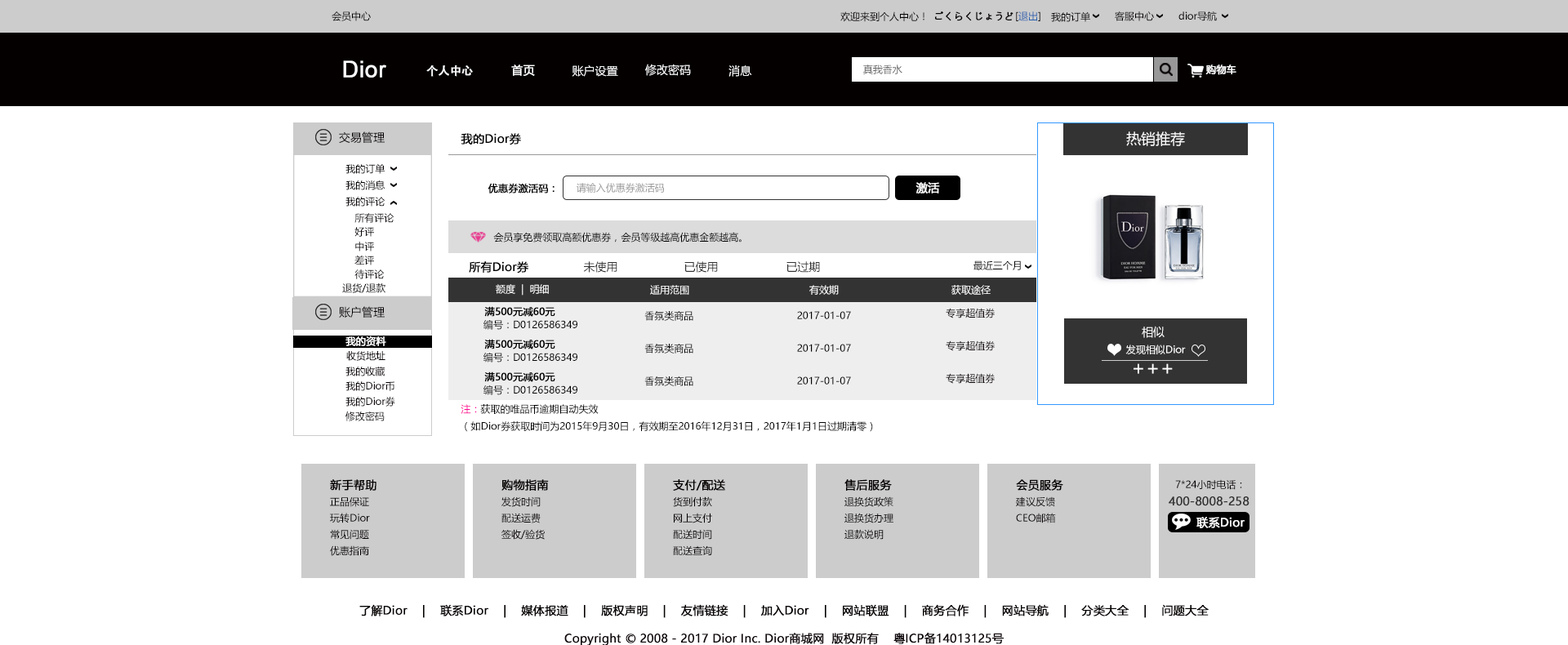
<style>
.page{position:relative;width:1568px;height:645px;background:#ffffff}
.page>*{position:absolute;margin:0}
.t1{font:9.8px "MicrosoftYaHei";color:#040000}
.t2{font:9.8px "MicrosoftYaHei";color:#040000;font-weight:bold}
.t3{font:9.8px "MicrosoftYaHei";color:#2a62ae}
.t4{font:22.9px "ArialMT";color:#ffffff;font-weight:bold}
.t5{font:11.4px "AdobeHeitiStd-Regular";color:#ffffff;font-weight:bold}
.t6{font:11.4px "MicrosoftYaHei";color:#ffffff;font-weight:bold}
.t7{font:11.4px "MicrosoftYaHei";color:#ffffff}
.t8{font:9.8px "MicrosoftYaHei";color:#666666}
.t9{font:9.8px "MicrosoftYaHei";color:#ffffff;font-weight:bold}
.t10{font:11.4px "MicrosoftYaHei";color:#040000}
.t11{font:11.4px "MicrosoftYaHei";color:#000000;font-weight:bold}
.t12{font:14.7px "MicrosoftYaHei";color:#ffffff}
.t13{font:9.8px "MicrosoftYaHei";color:#000000;font-weight:bold}
.t14{font:9.8px "MicrosoftYaHei";color:#999999}
.t15{font:9.8px "MicrosoftYaHei";color:#000000}
.t16{font:11.4px "MicrosoftYaHei";color:#333333}
.t17{font:9.8px "MicrosoftYaHei";color:#ffffff}
.t18{font:9.8px "MicrosoftYaHei";color:#0e050a}
.t19{font:9.8px "MicrosoftYaHei";color:#060001}
.t20{font:19.6px "MicrosoftYaHei";color:#ffffff}
.t21{font:9.8px "MicrosoftYaHei";color:#ff0099}
.t22{font:11.4px "MicrosoftYaHei";color:#040000;font-weight:bold}
.t23{font:11.4px "MicrosoftYaHei";color:#333333;font-weight:bold}
</style>
<div class="page">
<p class="t1" style="left:332px;top:11px;width:39px;height:10px">会员中心</p>
<p class="t1" style="left:840px;top:11px;width:84px;height:11px">欢迎来到个人中心！</p>
<p class="t2" style="left:935px;top:11px;width:78px;height:10px">ごくらくじょうど</p>
<p class="t3" style="left:1016px;top:11px;width:24px;height:10px"><span class="t1">[</span>退出<span class="t1">]</span></p>
<p class="t1" style="left:1051px;top:11px;width:39px;height:11px">我的订单</p>
<p class="t1" style="left:1115px;top:11px;width:39px;height:10px">客服中心</p>
<p class="t1" style="left:1178px;top:11px;width:39px;height:10px">dior导航</p>
<p class="t4" style="left:343px;top:60px;width:43px;height:18px">Dior</p>
<p class="t5" style="left:426px;top:65px;width:47px;height:12px">个人中心</p>
<p class="t6" style="left:511px;top:65px;width:24px;height:11px">首页</p>
<p class="t7" style="left:572px;top:65px;width:46px;height:12px">账户设置</p>
<p class="t7" style="left:645px;top:64px;width:46px;height:12px">修改密码</p>
<p class="t7" style="left:728px;top:65px;width:24px;height:12px">消息</p>
<p class="t8" style="left:863px;top:65px;width:39px;height:9px">真我香水</p>
<p class="t9" style="left:1205px;top:65px;width:31px;height:10px">购物车</p>
<p class="t10" style="left:339px;top:131px;width:46px;height:12px">交易管理</p>
<p class="t11" style="left:461px;top:133px;width:60px;height:12px">我的Dior券</p>
<p class="t12" style="left:1126px;top:131px;width:59px;height:15px">热销推荐</p>
<p class="t1" style="left:345px;top:163px;width:40px;height:11px">我的订单</p>
<p class="t1" style="left:345px;top:180px;width:40px;height:10px">我的消息</p>
<p class="t13" style="left:488px;top:183px;width:67px;height:11px">优惠券激活码：</p>
<p class="t14" style="left:577px;top:183px;width:87px;height:10px">请输入优惠券激活码</p>
<p class="t6" style="left:915px;top:182px;width:25px;height:12px">激活</p>
<p class="t1" style="left:345px;top:197px;width:40px;height:10px">我的评论</p>
<p class="t1" style="left:354px;top:213px;width:40px;height:10px">所有评论</p>
<p class="t1" style="left:354px;top:227px;width:20px;height:10px">好评</p>
<p class="t15" style="left:493px;top:232px;width:249px;height:11px">会员享免费领取高额优惠券，会员等级越高优惠金额越高。</p>
<p class="t1" style="left:355px;top:242px;width:19px;height:10px">中评</p>
<p class="t1" style="left:354px;top:255px;width:20px;height:10px">差评</p>
<p class="t1" style="left:354px;top:270px;width:31px;height:9px">待评论</p>
<p class="t11" style="left:469px;top:261px;width:60px;height:13px">所有Dior券</p>
<p class="t16" style="left:583px;top:261px;width:34px;height:12px">未使用</p>
<p class="t16" style="left:684px;top:261px;width:34px;height:12px">已使用</p>
<p class="t16" style="left:786px;top:261px;width:34px;height:12px">已过期</p>
<p class="t15" style="left:973px;top:261px;width:48px;height:9px">最近三个月</p>
<p class="t1" style="left:342px;top:283px;width:43px;height:10px">退货/退款</p>
<p class="t17" style="left:496px;top:284px;width:53px;height:12px">额度  |  明细</p>
<p class="t17" style="left:650px;top:285px;width:39px;height:10px">适用范围</p>
<p class="t17" style="left:809px;top:285px;width:30px;height:10px">有效期</p>
<p class="t17" style="left:951px;top:285px;width:40px;height:10px">获取途径</p>
<p class="t10" style="left:339px;top:306px;width:46px;height:12px">账户管理</p>
<p class="t13" style="left:484px;top:306px;width:71px;height:11px">满500元减60元</p>
<p class="t15" style="left:644px;top:311px;width:49px;height:10px">香氛类商品</p>
<p class="t15" style="left:797px;top:311px;width:54px;height:8px">2017-01-07</p>
<p class="t18" style="left:946px;top:308px;width:49px;height:10px">专享超值券</p>
<p class="t15" style="left:483px;top:320px;width:94px;height:10px">编号：D0126586349</p>
<p class="t7" style="left:1142px;top:326px;width:23px;height:12px">相似</p>
<p class="t9" style="left:345px;top:336px;width:41px;height:10px">我的资料</p>
<p class="t13" style="left:484px;top:339px;width:71px;height:11px">满500元减60元</p>
<p class="t18" style="left:946px;top:341px;width:49px;height:10px">专享超值券</p>
<p class="t19" style="left:346px;top:351px;width:39px;height:10px">收货地址</p>
<p class="t15" style="left:483px;top:353px;width:94px;height:10px">编号：D0126586349</p>
<p class="t15" style="left:644px;top:344px;width:49px;height:10px">香氛类商品</p>
<p class="t15" style="left:797px;top:344px;width:54px;height:8px">2017-01-07</p>
<p class="t17" style="left:1125px;top:345px;width:61px;height:9px">发现相似Dior</p>
<p class="t20" style="left:1134px;top:363px;width:39px;height:11px">+++</p>
<p class="t19" style="left:345px;top:367px;width:40px;height:9px">我的收藏</p>
<p class="t13" style="left:484px;top:372px;width:71px;height:10px">满500元减60元</p>
<p class="t15" style="left:644px;top:376px;width:49px;height:10px">香氛类商品</p>
<p class="t15" style="left:797px;top:376px;width:54px;height:9px">2017-01-07</p>
<p class="t18" style="left:946px;top:373px;width:49px;height:11px">专享超值券</p>
<p class="t19" style="left:345px;top:381px;width:49px;height:10px">我的Dior币</p>
<p class="t15" style="left:483px;top:385px;width:94px;height:10px">编号：D0126586349</p>
<p class="t19" style="left:345px;top:397px;width:50px;height:10px">我的Dior券</p>
<p class="t19" style="left:345px;top:412px;width:40px;height:9px">修改密码</p>
<p class="t15" style="left:461px;top:404px;width:412px;height:28px"><span class="t21">注：</span>获取的唯品币逾期自动失效<br>（如Dior券获取时间为2015年9月30日，有效期至2016年12月31日，2017年1月1日过期清零）</p>
<p class="t22" style="left:330px;top:479px;width:46px;height:12px">新手帮助</p>
<p class="t22" style="left:501px;top:479px;width:48px;height:12px">购物指南</p>
<p class="t22" style="left:673px;top:479px;width:52px;height:12px">支付/配送</p>
<p class="t22" style="left:844px;top:479px;width:48px;height:12px">售后服务</p>
<p class="t22" style="left:1016px;top:479px;width:47px;height:12px">会员服务</p>
<p class="t1" style="left:1175px;top:479px;width:67px;height:11px">7*24小时电话：</p>
<p class="t1" style="left:330px;top:497px;width:39px;height:10px">正品保证</p>
<p class="t1" style="left:501px;top:497px;width:40px;height:10px">发货时间</p>
<p class="t1" style="left:673px;top:497px;width:39px;height:10px">货到付款</p>
<p class="t1" style="left:844px;top:497px;width:49px;height:10px">退换货政策</p>
<p class="t1" style="left:1016px;top:497px;width:39px;height:10px">建议反馈</p>
<p class="t23" style="left:1169px;top:497px;width:81px;height:9px">400-8008-258</p>
<p class="t1" style="left:330px;top:513px;width:40px;height:10px">玩转Dior</p>
<p class="t1" style="left:501px;top:513px;width:40px;height:10px">配送运费</p>
<p class="t1" style="left:674px;top:513px;width:38px;height:10px">网上支付</p>
<p class="t1" style="left:844px;top:513px;width:49px;height:10px">退换货办理</p>
<p class="t1" style="left:1016px;top:513px;width:40px;height:10px">CEO邮箱</p>
<p class="t6" style="left:1196px;top:517px;width:49px;height:11px">联系Dior</p>
<p class="t1" style="left:330px;top:529px;width:39px;height:11px">常见问题</p>
<p class="t1" style="left:501px;top:529px;width:44px;height:11px">签收/验货</p>
<p class="t1" style="left:673px;top:529px;width:39px;height:11px">配送时间</p>
<p class="t1" style="left:844px;top:529px;width:40px;height:11px">退款说明</p>
<p class="t1" style="left:330px;top:546px;width:39px;height:10px">优惠指南</p>
<p class="t1" style="left:673px;top:546px;width:39px;height:9px">配送查询</p>
<p class="t22" style="left:359px;top:604px;width:850px;height:14px">了解Dior    |    联系Dior    |    媒体报道    |    版权声明    |    友情链接    |    加入Dior    |    网站联盟    |    商务合作    |    网站导航    |    分类大全    |    问题大全</p>
<p class="t11" style="left:564px;top:632px;width:440px;height:14px">Copyright © 2008 - 2017 Dior Inc. Dior商城网  版权所有    粤ICP备14013125号</p>
</div>
